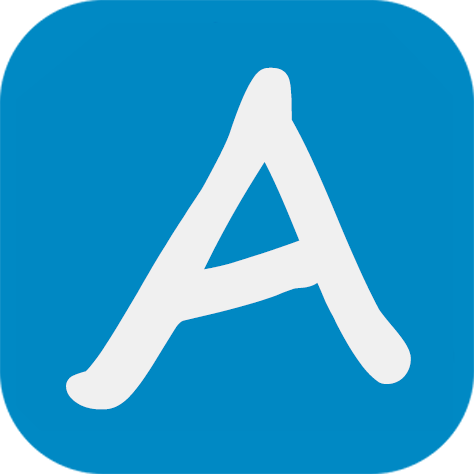
<style>
.page{position:relative;width:474px;height:474px;background:#0088c3}
.page>*{position:absolute;margin:0}
.t1{font:415.6px "SegoeScript";letter-spacing:-0.06em;color:#f0f0f0;font-weight:bold}
</style>
<div class="page">
<p class="t1" style="left:66px;top:67px;width:345px;height:343px;rotate:-4deg">A</p>
</div>
